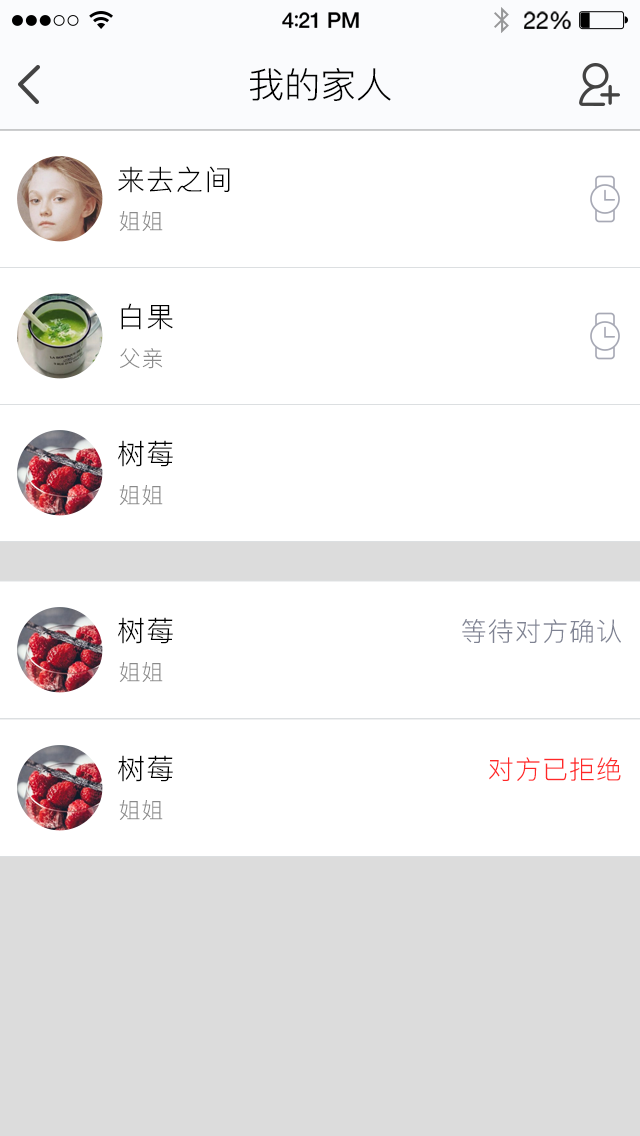
<style>
.page{position:relative;width:640px;height:1136px;background:#ffffff}
.page>*{position:absolute;margin:0}
.t1{font:36px "PingFang-SC-Regular";color:#000000}
.t2{font:28px "PingFang-SC-Regular";letter-spacing:0.04em;color:#000000}
.t3{font:22px "PingFang-SC-Regular";letter-spacing:0.04em;color:#8a8a8a}
.t4{font:26px "PingFang-SC-Regular";letter-spacing:0.04em;color:#7f8393}
.t5{font:26px "PingFang-SC-Regular";letter-spacing:0.04em;color:#ff2828}
</style>
<div class="page">
<p class="t1" style="left:250px;top:68px;width:141px;height:33px">我的家人</p>
<p class="t2" style="left:118px;top:166px;width:112px;height:27px">来去之间</p>
<p class="t3" style="left:119px;top:211px;width:44px;height:20px">姐姐</p>
<p class="t2" style="left:121px;top:303px;width:52px;height:27px">白果</p>
<p class="t3" style="left:120px;top:348px;width:43px;height:21px">父亲</p>
<p class="t2" style="left:118px;top:440px;width:55px;height:27px">树莓</p>
<p class="t3" style="left:119px;top:485px;width:44px;height:20px">姐姐</p>
<p class="t2" style="left:118px;top:617px;width:55px;height:27px">树莓</p>
<p class="t4" style="left:462px;top:619px;width:159px;height:24px">等待对方确认</p>
<p class="t3" style="left:119px;top:662px;width:44px;height:20px">姐姐</p>
<p class="t2" style="left:118px;top:755px;width:55px;height:27px">树莓</p>
<p class="t5" style="left:489px;top:757px;width:132px;height:24px">对方已拒绝</p>
<p class="t3" style="left:119px;top:800px;width:44px;height:20px">姐姐</p>
</div>
